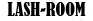
<style>
.page{position:relative;width:93px;height:21px;background:#ffffff}
.page>*{position:absolute;margin:0}
.t1{font:18px "BernardMT-Condensed";color:#000000}
</style>
<div class="page">
<p class="t1" style="left:7px;top:2px;width:79px;height:14px">LASH-ROOM</p>
</div>
